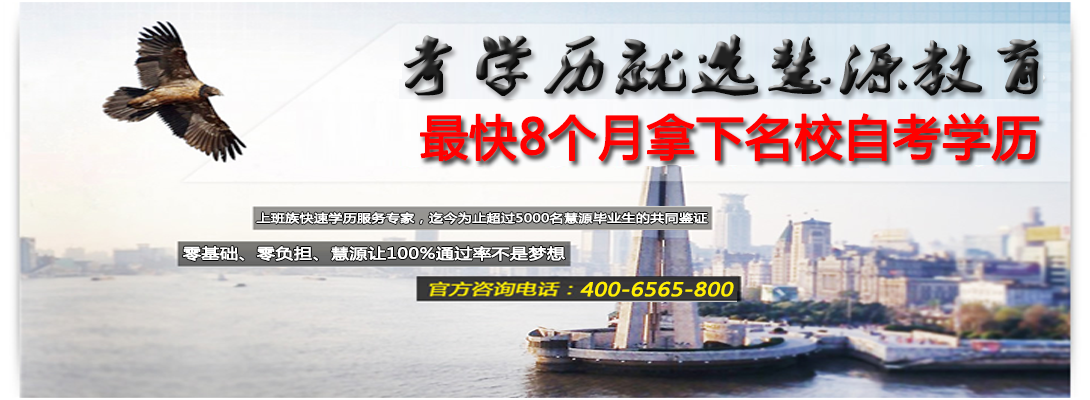
<style>
.page{position:relative;width:1090px;height:400px}
.page>*{position:absolute;margin:0}
.t1{font:57.6px "2.0-";font-weight:bold;scale:1.25 1}
.t2{font:48px "MicrosoftYaHei";color:#ff0000;font-weight:bold}
.t3{font:11.2px "MicrosoftYaHei";color:#ffffff;font-weight:bold;scale:1.25 1}
.t4{font:14.4px "MicrosoftYaHei";color:#ffffff;font-weight:bold;scale:1.25 1}
.t5{font:18px "MicrosoftYaHei";color:#ffee02;font-weight:bold;font-style:italic;scale:1.2 1}
</style>
<div class="page">
<p class="t1" style="left:404px;top:34px;width:635px;height:62px">考学历就选慧源教育</p>
<p class="t2" style="left:420px;top:113px;width:620px;height:49px">最快8个月拿下名校自考学历</p>
<p class="t3" style="left:256px;top:212px;width:452px;height:12px">上班族快速学历服务专家，迄今为止超过5000名慧源毕业生的共同鉴证</p>
<p class="t4" style="left:182px;top:246px;width:383px;height:15px">零基础、零负担、慧源让100%通过率不是梦想</p>
<p class="t5" style="left:580px;top:281px;width:154px;height:16px">400-6565-800</p>
</div>
